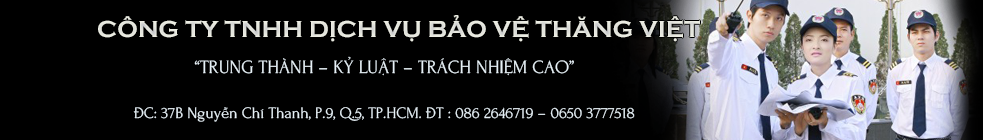
<style>
.page{position:relative;width:983px;height:140px;background:#000000}
.page>*{position:absolute;margin:0}
.t1{font:24px "UTMCopperplateBold";color:#e6e6df}
.t2{font:18.7px "UTM-Forum";color:#e7f1f7}
.t3{font:16px "UTM-Forum";color:#e7f1f7}
</style>
<div class="page">
<p class="t1" style="left:98px;top:15px;width:602px;height:27px">CÔNG TY TNHH DỊCH VỤ BẢO VỆ THĂNG VIỆT</p>
<p class="t2" style="left:194px;top:56px;width:380px;height:20px">“TRUNG THÀNH – KỶ LUẬT – TRÁCH NHIỆM CAO”</p>
<p class="t3" style="left:133px;top:107px;width:502px;height:15px">ĐC: 37B Nguyễn Chí Thanh, P.9, Q.5, TP.HCM. ĐT : 086 2646719 – 0650 3777518</p>
</div>
